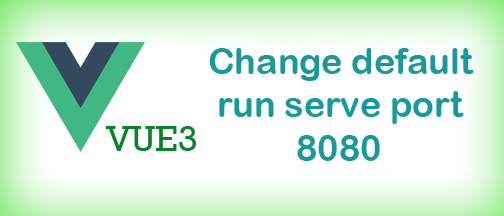
<style>
.page{position:relative;width:504px;height:216px;background:#ffffff}
.page>*{position:absolute;margin:0}
.t1{font:36px "ArialRoundedMTBold";color:#189a9c}
.t2{font:36px "Rockwell";color:#0a842a}
</style>
<div class="page">
<p class="t1" style="left:209px;top:48px;width:265px;height:113px;text-align:center">Change default run serve port 8080</p>
<p class="t2" style="left:105px;top:126px;width:91px;height:25px">VUE3</p>
</div>
